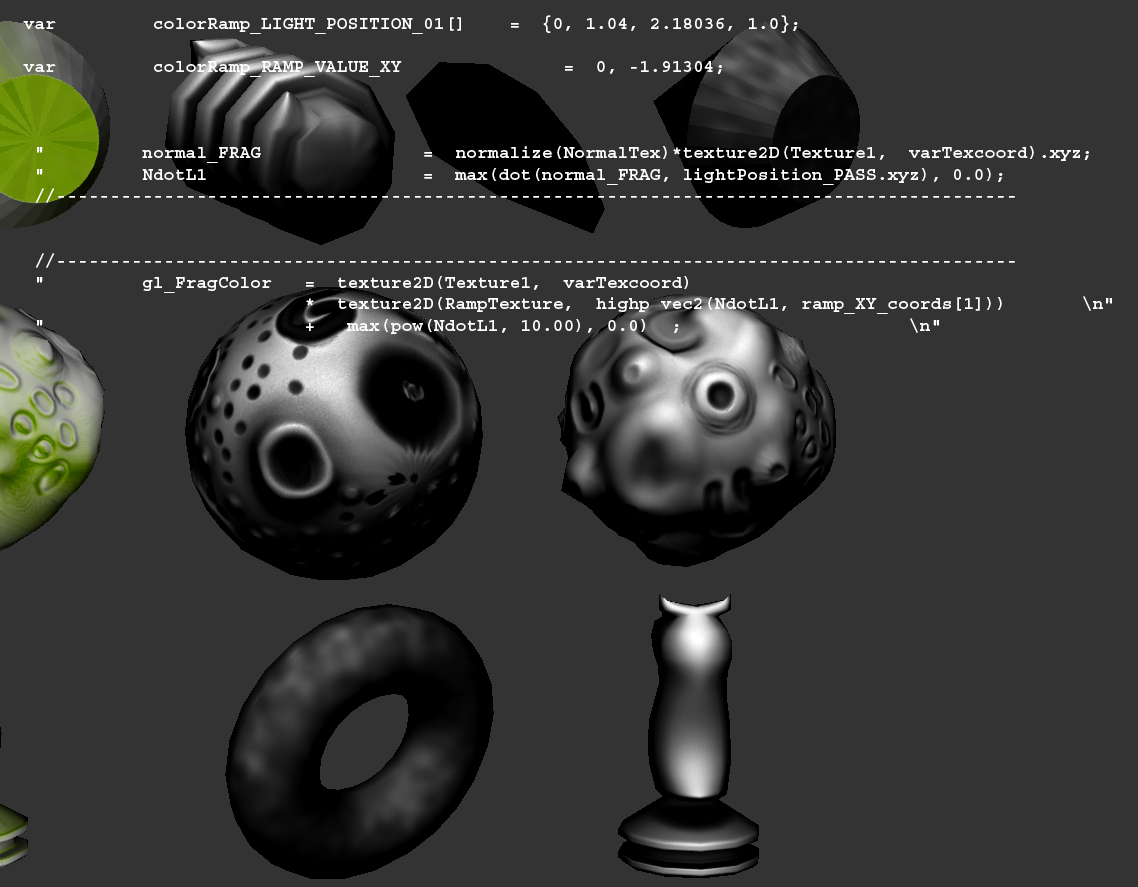
<style>
.page{position:relative;width:1138px;height:887px;background:#333333}
.page>*{position:absolute;margin:0}
.t1{font:18px "Courier-Bold";color:#ffffff}
</style>
<div class="page">
<p class="t1" style="left:23px;top:15px;width:1090px;height:319px">var         colorRamp_LIGHT_POSITION_01[]    =  {0, 1.04, 2.18036, 1.0};<br><br>     var         colorRamp_RAMP_VALUE_XY               =  0, -1.91304;<br><br><br><br>      "         normal_FRAG               =  normalize(NormalTex)*texture2D(Texture1,  varTexcoord).xyz;                                                                  \n"                       <br>      "         NdotL1                    =  max(dot(normal_FRAG, lightPosition_PASS.xyz), 0.0);                                    \n"                       <br>      //-----------------------------------------------------------------------------------------<br><br><br>      //-----------------------------------------------------------------------------------------        <br>      "         gl_FragColor   =  texture2D(Texture1,  varTexcoord) <br>                               *  texture2D(RampTexture,  highp vec2(NdotL1, ramp_XY_coords[1]))       \n"    <br>      "                        +   max(pow(NdotL1, 10.00), 0.0)  ;                     \n"</p>
</div>
